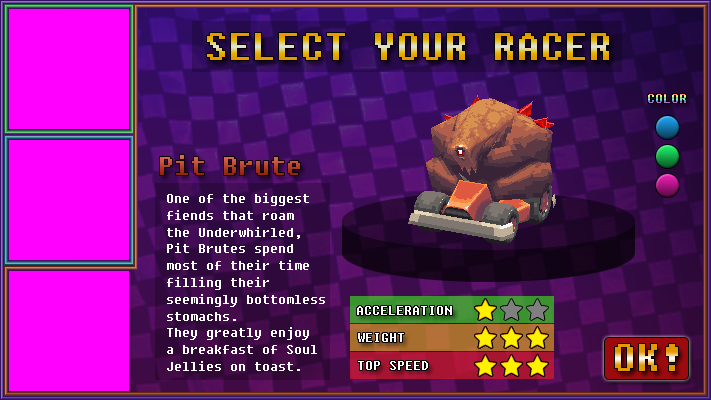
<style>
.page{position:relative;width:711px;height:400px}
.page>*{position:absolute;margin:0}
.t1{font:36px "Fixedsys"}
.t2{font:20px "Fixedsys"}
.t3{font:24px "Fixedsys"}
.t4{font:14px "Fixedsys";color:#ffffff}
.t5{font:20px "Fixedsys";color:#fafafa}
.t6{font:35.9px "Fixedsys"}
</style>
<div class="page">
<p class="t1" style="left:207px;top:33px;width:402px;height:27px">SELECT YOUR RACER</p>
<p class="t2" style="left:648px;top:94px;width:38px;height:9px">COLOR</p>
<p class="t3" style="left:160px;top:155px;width:140px;height:20px">Pit Brute</p>
<p class="t4" style="left:167px;top:193px;width:158px;height:178px">One of the biggest<br>fiends that roam <br>the Underwhirled,<br>Pit Brutes spend<br>most of their time<br>filling their<br>seemingly bottomless<br>stomachs.<br>They greatly enjoy<br>a breakfast of Soul<br>Jellies on toast.</p>
<p class="t5" style="left:357px;top:306px;width:95px;height:9px">ACCELERATION</p>
<p class="t5" style="left:358px;top:333px;width:46px;height:9px">WEIGHT</p>
<p class="t6" style="left:615px;top:344px;width:63px;height:27px">OK!</p>
<p class="t5" style="left:358px;top:361px;width:70px;height:9px">TOP SPEED</p>
</div>
